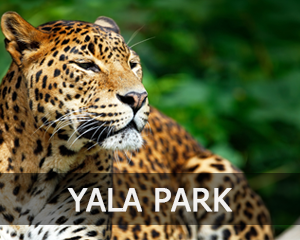
<style>
.page{position:relative;width:300px;height:240px}
.page>*{position:absolute;margin:0}
.t1{font:32.1px "Tahoma";color:#ffffff;font-weight:bold}
</style>
<div class="page">
<p class="t1" style="left:67px;top:188px;width:166px;height:24px;opacity:0.9">YALA PARK</p>
</div>
